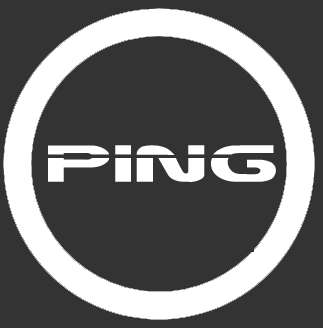
<style>
.page{position:relative;width:323px;height:328px;background:#333333}
.page>*{position:absolute;margin:0}
.t1{font:55px "Laserian";color:#ffffff}
</style>
<div class="page">
<p class="t1" style="left:48px;top:145px;width:228px;height:37px">PING</p>
</div>
